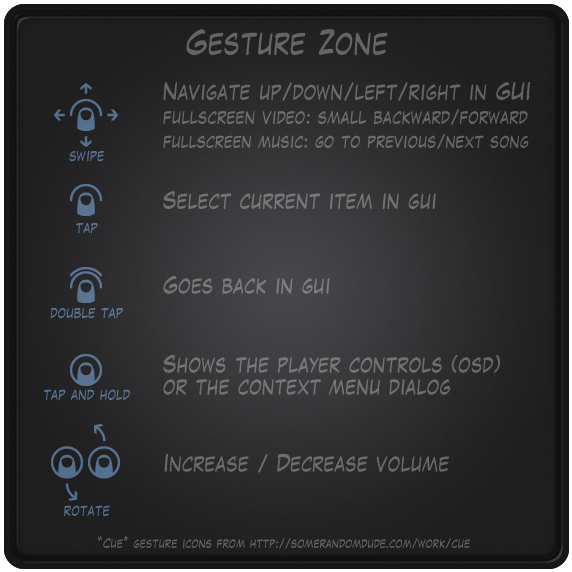
<style>
.page{position:relative;width:572px;height:572px}
.page>*{position:absolute;margin:0}
.t1{font:28.6px "LaffayetteComicPro";letter-spacing:0.05em;color:#4d4d4d;scale:0.91 1}
.t2{font:15.8px/24px "LaffayetteComicPro";letter-spacing:0.05em;color:#69696a;scale:0.91 1}
.t3{font:19.8px/24px "LaffayetteComicPro";letter-spacing:0.05em;color:#69696a;scale:0.91 1}
.t4{font:16.5px/24px "LaffayetteComicPro";letter-spacing:0.05em;color:#69696a;scale:0.91 1}
.t5{font:13.2px "LaffayetteComicPro";letter-spacing:0.05em;color:#557290;scale:0.91 1}
.t6{font:19.8px "LaffayetteComicPro";letter-spacing:0.05em;color:#747475;scale:0.91 1}
.t7{font:13.2px "LaffayetteComicPro";letter-spacing:0.05em;color:#597593;scale:0.91 1}
.t8{font:19.8px "LaffayetteComicPro";letter-spacing:0.05em;color:#7b7b7c;scale:0.91 1}
.t9{font:19.8px/22px "LaffayetteComicPro";letter-spacing:0.05em;color:#737375;scale:0.91 1}
.t10{font:13.2px "LaffayetteComicPro";letter-spacing:0.05em;color:#577391;scale:0.91 1}
.t11{font:19.8px "LaffayetteComicPro";letter-spacing:0.05em;color:#6a6a6c;scale:0.91 1}
.t12{font:13.2px "LaffayetteComicPro";letter-spacing:0.05em;color:#52708e;scale:0.91 1}
.t13{font:11px "LaffayetteComicPro";letter-spacing:0.05em;color:#4d4d4d;scale:0.91 1}
.t14{font:13.2px "LaffayetteComicPro";letter-spacing:0.05em;color:#4d4d4d;scale:0.91 1}
</style>
<div class="page">
<p class="t1" style="left:186px;top:29px;width:202px;height:26px">Gesture Zone</p>
<p class="t2" style="left:163px;top:82px;width:367px;height:67px"><span class="t3">Navigate up/down/left/right in GUI<br></span><span class="t4">fullscreen video: small backward/forward<br></span>fullscreen music: go to previous/next song</p>
<p class="t5" style="left:69px;top:150px;width:36px;height:12px">swipe</p>
<p class="t6" style="left:163px;top:191px;width:273px;height:18px">Select current item in gui</p>
<p class="t7" style="left:76px;top:223px;width:22px;height:11px">tap</p>
<p class="t8" style="left:163px;top:275px;width:167px;height:19px">Goes back in gui</p>
<p class="t7" style="left:50px;top:308px;width:73px;height:11px">double tap</p>
<p class="t9" style="left:163px;top:354px;width:337px;height:41px">Shows the player controls (osd) <br>or the context menu dialog</p>
<p class="t10" style="left:44px;top:389px;width:86px;height:11px">tap and hold</p>
<p class="t11" style="left:164px;top:453px;width:285px;height:20px">Increase / Decrease volume</p>
<p class="t12" style="left:64px;top:505px;width:46px;height:11px">rotate</p>
<p class="t13" style="left:97px;top:536px;width:373px;height:13px"><span class="t14">“</span>Cue<span class="t14">”</span> gesture icons from http://somerandomdude.com/work/cue</p>
</div>
